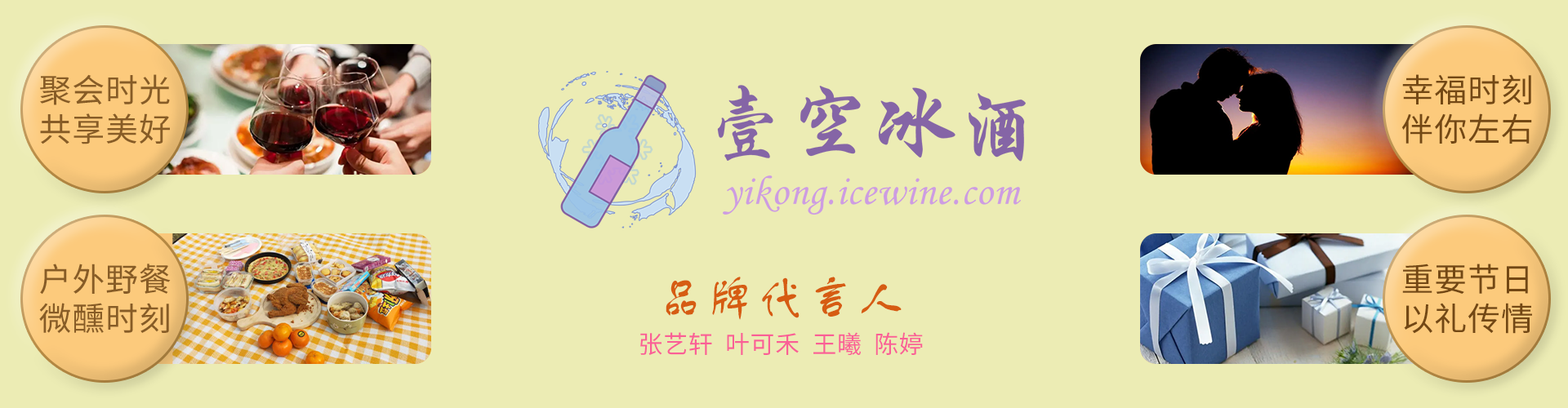
<style>
.page{position:relative;width:1568px;height:408px;background:#ececb4}
.page>*{position:absolute;margin:0}
.t1{font:32.7px "SourceHanSansCN-Regular";letter-spacing:0.02em;color:#875c26}
.t2{font:32.7px "SourceHanSansCN-Regular";letter-spacing:0.02em;color:#734814}
.t3{font:49px "FZSTK--GBK1-0";letter-spacing:0.02em;color:#d65c12}
.t4{font:24.5px "SourceHanSansCN-Regular";letter-spacing:0.02em;color:#fa5f96}
</style>
<div class="page">
<p class="t1" style="left:40px;top:74px;width:130px;height:71px;text-align:center">聚会时光<br>共享美好</p>
<p class="t2" style="left:1401px;top:74px;width:131px;height:70px;text-align:center">幸福时刻<br>伴你左右</p>
<p class="t1" style="left:39px;top:264px;width:132px;height:70px;text-align:center">户外野餐<br>微醺时刻</p>
<p class="t2" style="left:1402px;top:264px;width:130px;height:70px;text-align:center">重要节日<br>以礼传情</p>
<p class="t3" style="left:666px;top:277px;width:236px;height:43px">品牌代言人</p>
<p class="t4" style="left:640px;top:332px;width:283px;height:24px">张艺轩  叶可禾  王曦  陈婷</p>
</div>
